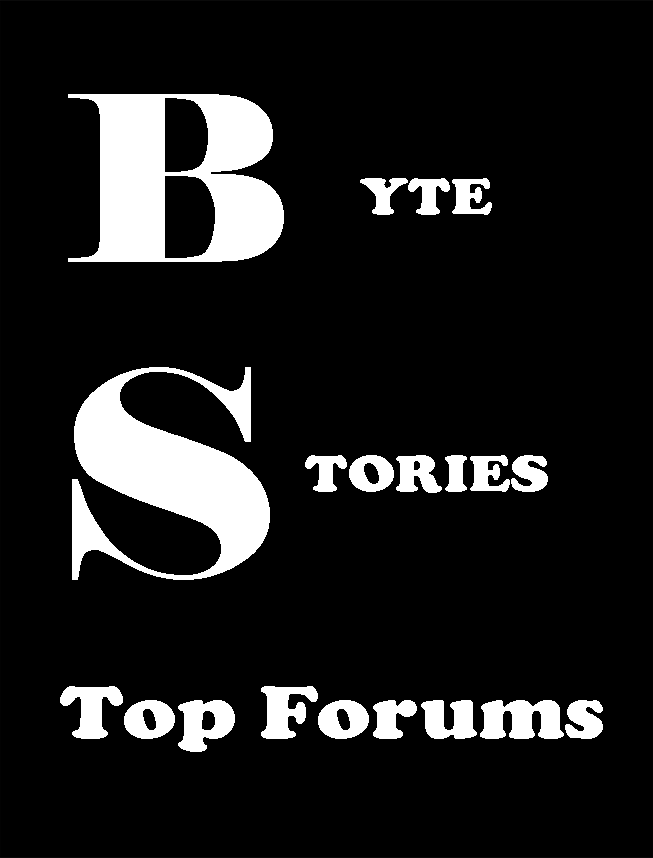
<style>
.page{position:relative;width:653px;height:858px;background:#000000}
.page>*{position:absolute;margin:0}
.t1{font:230.6px "Elephant-Regular";color:#ffffff;scale:1.15 1}
.t2{font:53px "CooperBlack";color:#ffffff;scale:1.15 1}
.t3{font:284.2px "Elephant-Regular";color:#ffffff;scale:1.15 1}
.t4{font:77.3px "CooperBlack";color:#ffffff;scale:1.15 1}
</style>
<div class="page">
<p class="t1" style="left:68px;top:94px;width:216px;height:168px">B</p>
<p class="t2" style="left:360px;top:178px;width:132px;height:37px">YTE</p>
<p class="t3" style="left:72px;top:367px;width:198px;height:213px">S</p>
<p class="t2" style="left:305px;top:455px;width:243px;height:38px">TORIES</p>
<p class="t4" style="left:60px;top:686px;width:543px;height:66px">Top Forums</p>
</div>
